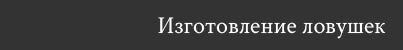
<style>
.page{position:relative;width:403px;height:50px;background:#333333}
.page>*{position:absolute;margin:0}
.t1{font:24px "CrimsonText-Regular";color:#ffffff}
</style>
<div class="page">
<p class="t1" style="left:158px;top:17px;width:228px;height:22px">Изготовление ловушек</p>
</div>
